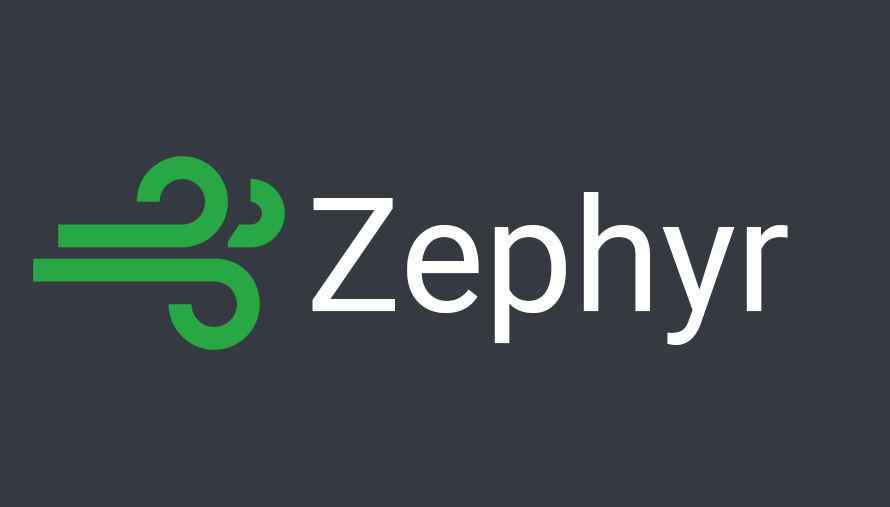
<style>
.page{position:relative;width:890px;height:507px;background:#343a40}
.page>*{position:absolute;margin:0}
.t1{font:159.2px "Roboto-Regular";color:#ffffff}
</style>
<div class="page">
<p class="t1" style="left:312px;top:192px;width:476px;height:153px">Zephyr</p>
</div>
